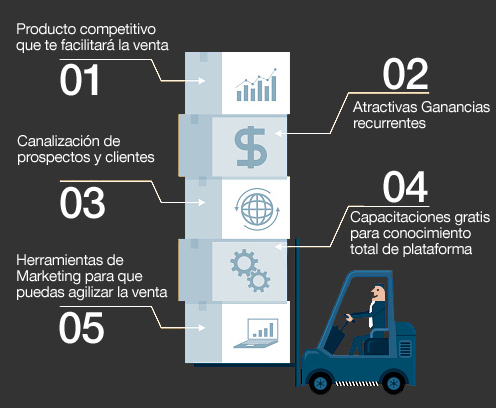
<style>
.page{position:relative;width:496px;height:408px;background:#333333}
.page>*{position:absolute;margin:0}
.t1{font:15.2px/16.1px "HelveticaNeueLTStd-Roman";letter-spacing:-0.025em;color:#ffffff}
.t2{font:43.8px "HelveticaNeueLTStd-Md";letter-spacing:-0.025em;color:#ffffff}
</style>
<div class="page">
<p class="t1" style="left:16px;top:23px;width:153px;height:30px">Producto competitivo <br>que te facilitará la venta</p>
<p class="t2" style="left:60px;top:63px;width:38px;height:33px">01</p>
<p class="t2" style="left:383px;top:57px;width:45px;height:33px">02</p>
<p class="t1" style="left:352px;top:101px;width:138px;height:28px">Atractivas Ganancias<br>recurrentes</p>
<p class="t1" style="left:17px;top:135px;width:138px;height:31px">Canalización de <br>prospectos y clientes</p>
<p class="t2" style="left:383px;top:170px;width:45px;height:33px">04</p>
<p class="t2" style="left:60px;top:186px;width:45px;height:33px">03</p>
<p class="t1" style="left:350px;top:211px;width:140px;height:46px">Capacitaciones gratis<br>para conocimiento <br>total de plataforma</p>
<p class="t1" style="left:17px;top:254px;width:151px;height:47px">Herramientas de <br>Marketing para que <br>puedas agilizar la venta</p>
<p class="t2" style="left:59px;top:311px;width:45px;height:33px">05</p>
</div>
